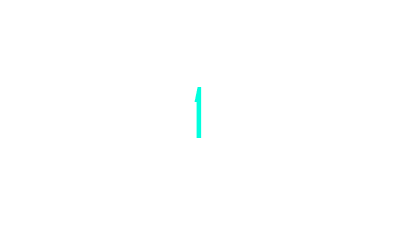
<style>
.page{position:relative;width:400px;height:225px;background:#ffffff}
.page>*{position:absolute;margin:0}
.t1{font:66.7px "AgencyFB-Reg";color:#00ffde}
</style>
<div class="page">
<p class="t1" style="left:194px;top:87px;width:8px;height:51px">1</p>
</div>
